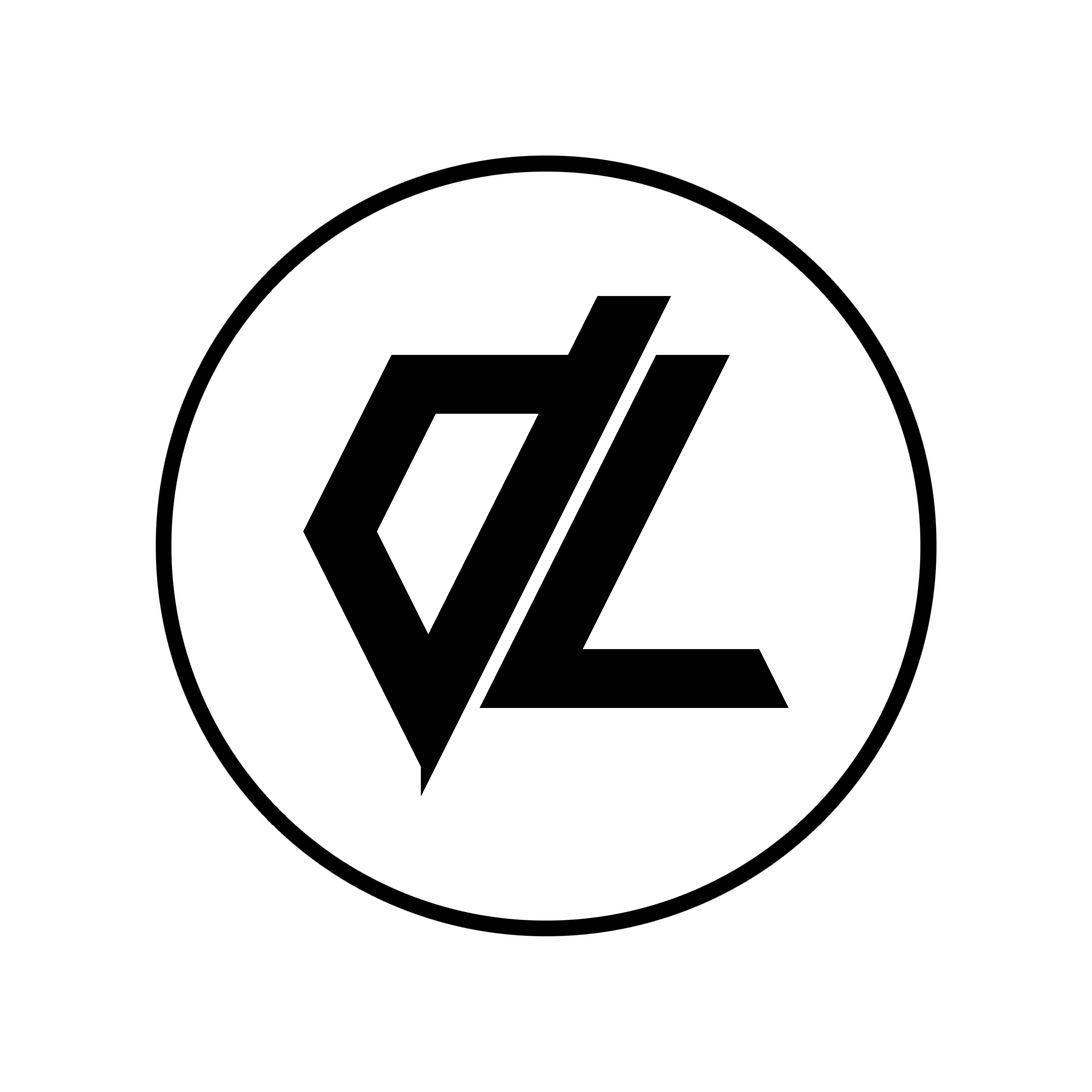
<style>
.page{position:relative;width:1092px;height:1092px;background:#ffffff}
.page>*{position:absolute;margin:0}
.t1{font:470.7px "Berate-The-Elementary";color:#010101}
</style>
<div class="page">
<p class="t1" style="left:303px;top:296px;width:486px;height:500px">DL</p>
</div>
